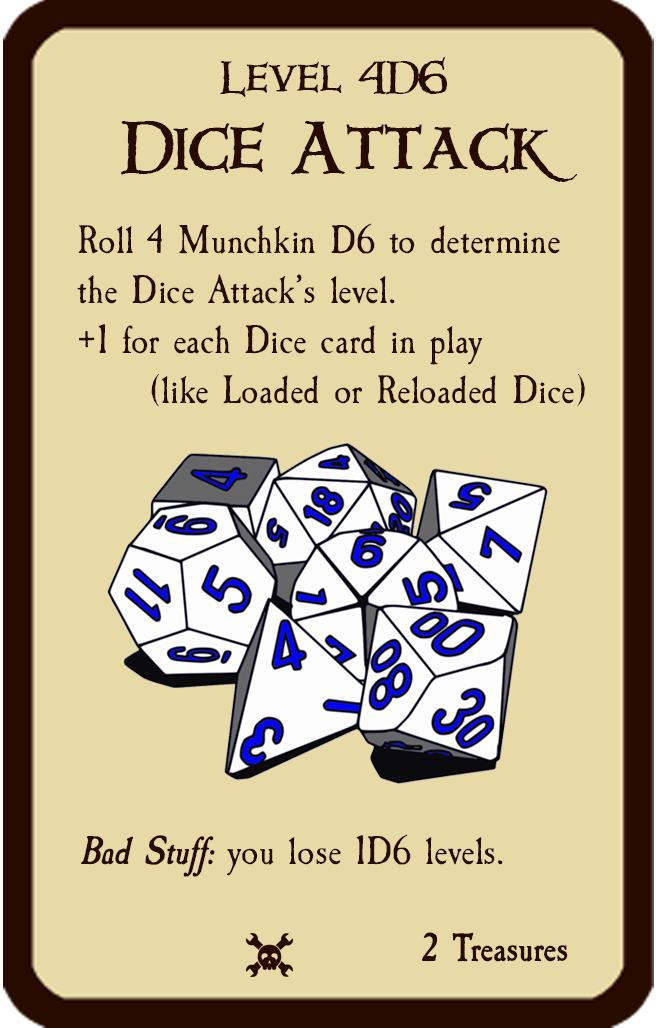
<style>
.page{position:relative;width:661px;height:1028px;background:#e7daa7}
.page>*{position:absolute;margin:0}
.t1{font:66.7px "Windlass";color:#270b00}
.t2{font:41.7px "Windlass";color:#270b00}
.t3{font:41.7px "CaslonAntique";color:#270b00}
.t4{font:41.7px "CaslonAntique-BoldItalic";color:#270b00}
.t5{font:41.7px "CaslonAntique-Bold";color:#270b00}
</style>
<div class="page">
<p class="t1" style="left:121px;top:57px;width:457px;height:125px;text-align:center"><span class="t2">Level 4D6<br></span>Dice Attack</p>
<p class="t3" style="left:77px;top:223px;width:508px;height:184px">Roll 4 Munchkin D6 to determine the Dice Attack’s level.<br>+1 for each Dice card in play <br>(like Loaded or Reloaded Dice)</p>
<p class="t3" style="left:81px;top:834px;width:422px;height:43px"><span class="t4">Bad Stuff:</span> you lose 1D6 levels.</p>
<p class="t5" style="left:422px;top:932px;width:146px;height:30px">2 Treasures</p>
</div>
